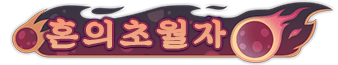
<style>
.page{position:relative;width:338px;height:65px;background:#ffffff}
.page>*{position:absolute;margin:0}
.t1{font:32px "SDKukdetopokki-aLt";letter-spacing:0.1em;color:#efa480;font-weight:bold;scale:1.1 1}
</style>
<div class="page">
<p class="t1" style="left:46px;top:18px;width:180px;height:31px">혼의초월자</p>
</div>
